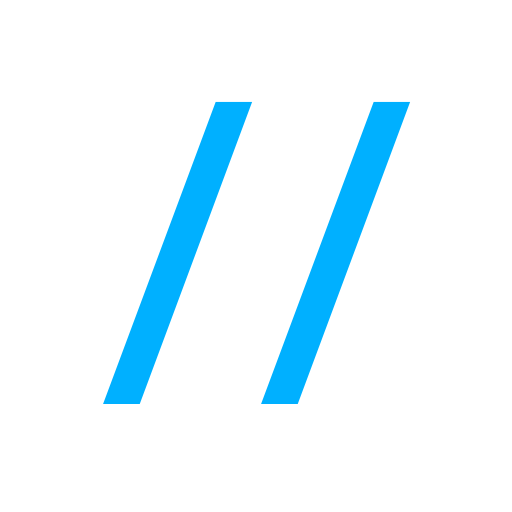
<style>
.page{position:relative;width:512px;height:512px;background:#ffffff}
.page>*{position:absolute;margin:0}
.t1{font:423.3px "NotoSans";color:#00b0ff}
</style>
<div class="page">
<p class="t1" style="left:103px;top:101px;width:308px;height:303px">//</p>
</div>
